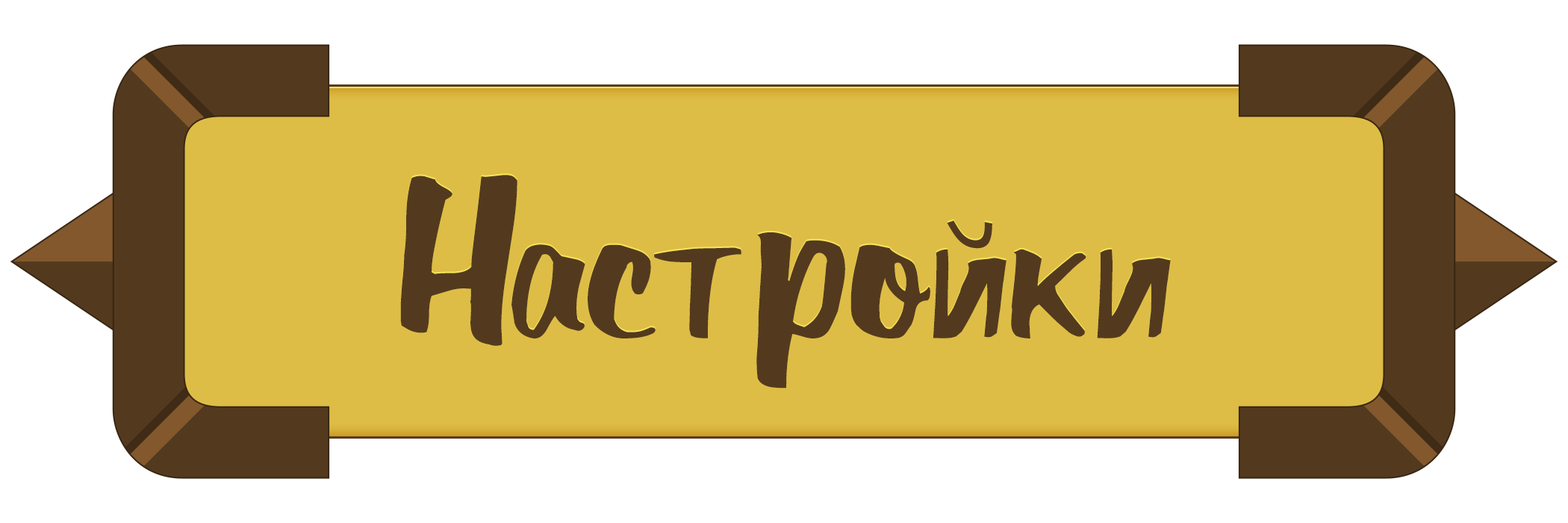
<style>
.page{position:relative;width:1568px;height:523px;background:#debd46}
.page>*{position:absolute;margin:0}
.t1{font:149.3px "AA_BigSkyttstd";letter-spacing:0.025em;color:#533a1e}
</style>
<div class="page">
<p class="t1" style="left:400px;top:175px;width:771px;height:213px">Настройки</p>
</div>
